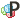
<style>
.page{position:relative;width:20px;height:20px;background:#ffffff}
.page>*{position:absolute;margin:0}
.t1{font:20.8px "MicrosoftPhagsPa";color:#35312a;font-weight:bold}
</style>
<div class="page">
<p class="t1" style="left:9px;top:1px;width:11px;height:16px">P</p>
</div>
